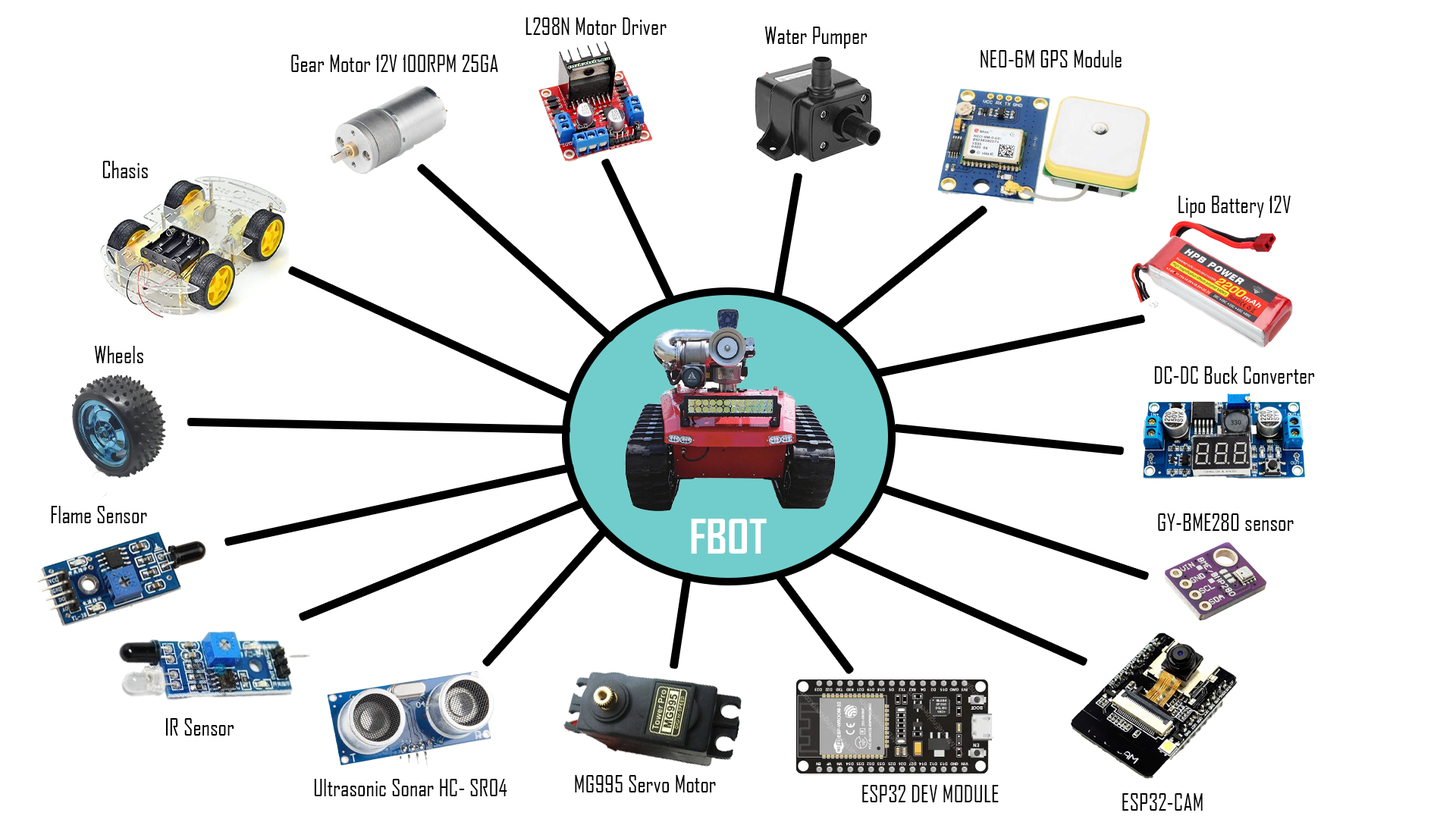
<style>
.page{position:relative;width:1456px;height:819px;background:#ffffff}
.page>*{position:absolute;margin:0}
.t1{font:22.7px "AgencyFB-Reg";color:#000000}
.t2{font:45.5px "AgencyFB-Bold";color:#ffffff}
</style>
<div class="page">
<p class="t1" style="left:526px;top:17px;width:141px;height:18px">L298N Motor Driver</p>
<p class="t1" style="left:764px;top:27px;width:104px;height:22px">Water Pumper</p>
<p class="t1" style="left:981px;top:50px;width:141px;height:17px">NEO-6M GPS Module</p>
<p class="t1" style="left:291px;top:55px;width:207px;height:17px">Gear Motor 12V 100RPM 25GA</p>
<p class="t1" style="left:102px;top:161px;width:46px;height:17px">Chasis</p>
<p class="t1" style="left:1178px;top:196px;width:113px;height:22px">Lipo Battery 12V</p>
<p class="t1" style="left:94px;top:346px;width:49px;height:17px">Wheels</p>
<p class="t1" style="left:1154px;top:366px;width:161px;height:18px">DC-DC Buck Converter</p>
<p class="t1" style="left:51px;top:506px;width:96px;height:17px">Flame Sensor</p>
<p class="t2" style="left:691px;top:519px;width:76px;height:35px">FBOT</p>
<p class="t1" style="left:1158px;top:513px;width:136px;height:18px">GY-BME280 sensor</p>
<p class="t1" style="left:165px;top:718px;width:69px;height:18px">IR Sensor</p>
<p class="t1" style="left:314px;top:779px;width:193px;height:17px">Ultrasonic Sonar HC- SR04</p>
<p class="t1" style="left:575px;top:775px;width:141px;height:17px">MG995 Servo Motor</p>
<p class="t1" style="left:862px;top:785px;width:137px;height:17px">ESP32 DEV MODULE</p>
<p class="t1" style="left:1122px;top:793px;width:81px;height:18px">ESP32-CAM</p>
</div>
